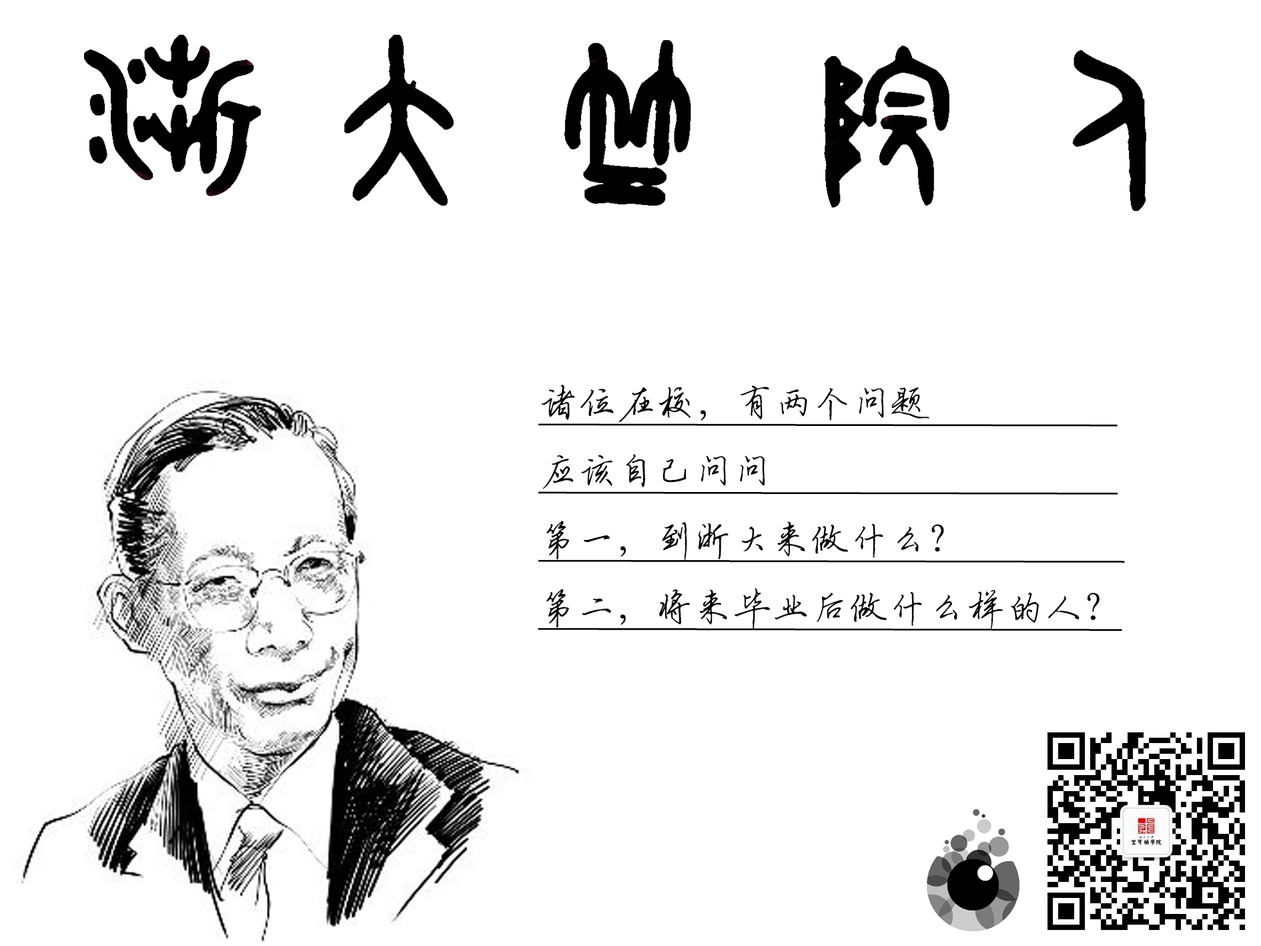
<style>
.page{position:relative;width:1261px;height:946px;background:#ffffff}
.page>*{position:absolute;margin:0}
.t1{font:38.9px "QXyingbixing";color:#000000;text-decoration:underline}
</style>
<div class="page">
<p class="t1" style="left:538px;top:384px;width:587px;height:247px">诸位在校，有两个问题                   <br>应该自己问问                                   <br>第一，到浙大来做什么？                <br>第二，将来毕业后做什么样的人？</p>
</div>
